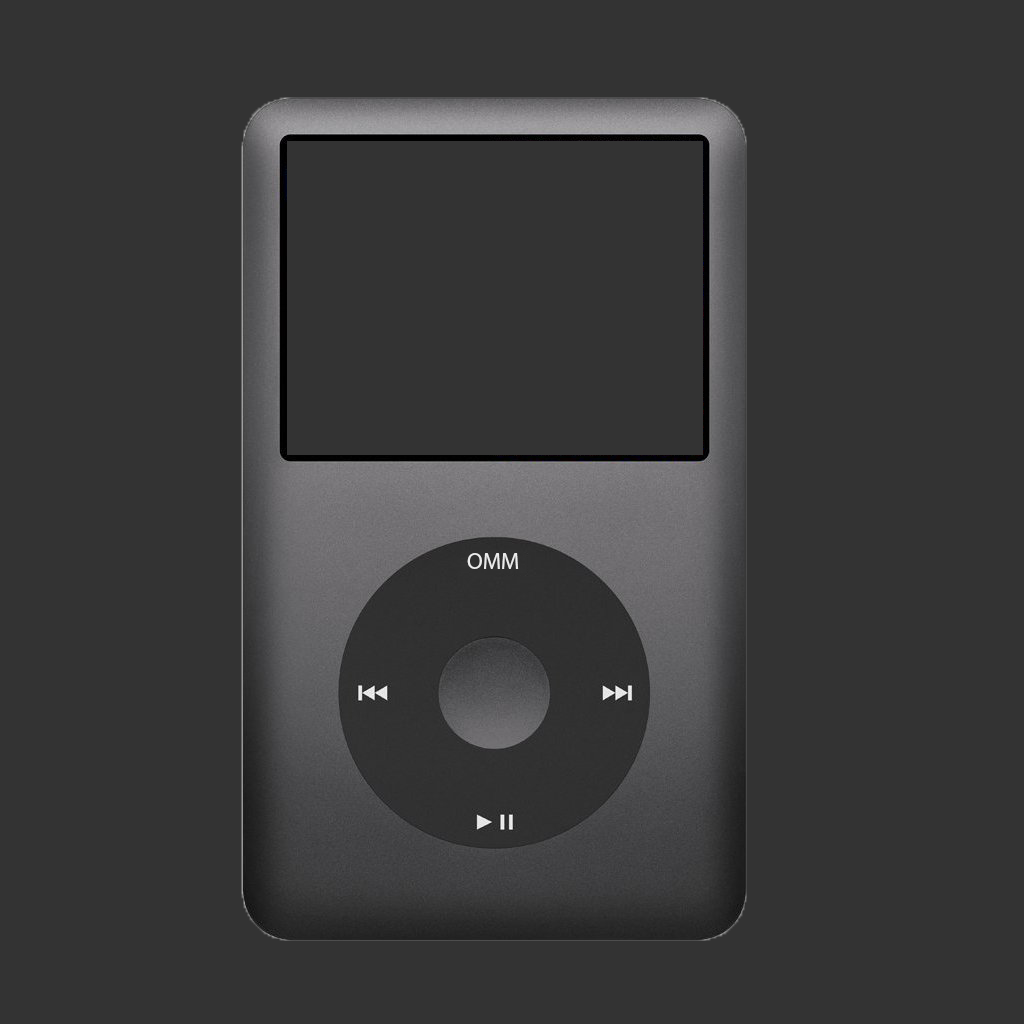
<style>
.page{position:relative;width:1024px;height:1024px;background:#333333}
.page>*{position:absolute;margin:0}
.t1{font:23px "MyriadPro-Regular";color:#ececec}
</style>
<div class="page">
<p class="t1" style="left:467px;top:553px;width:52px;height:16px">OMM</p>
</div>
